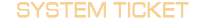
<style>
.page{position:relative;width:206px;height:20px;background:#ffffff}
.page>*{position:absolute;margin:0}
.t1{font:23px "MicrogrammaD-MediExte";letter-spacing:0.075em;color:#f7d093;font-weight:bold;scale:0.7 1}
</style>
<div class="page">
<p class="t1" style="left:17px;top:2px;width:172px;height:16px">SYSTEM TICKET</p>
</div>
